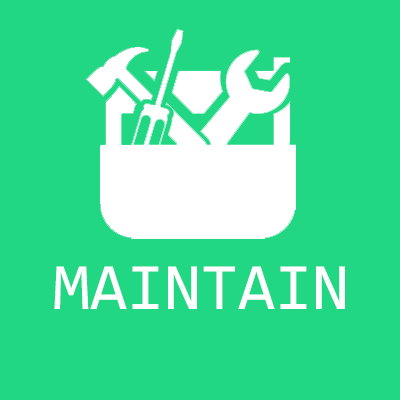
<style>
.page{position:relative;width:400px;height:400px;background:#22d783}
.page>*{position:absolute;margin:0}
.t1{font:66.8px "Consolas";color:#ffffff}
</style>
<div class="page">
<p class="t1" style="left:54px;top:266px;width:291px;height:43px">MAINTAIN</p>
</div>
